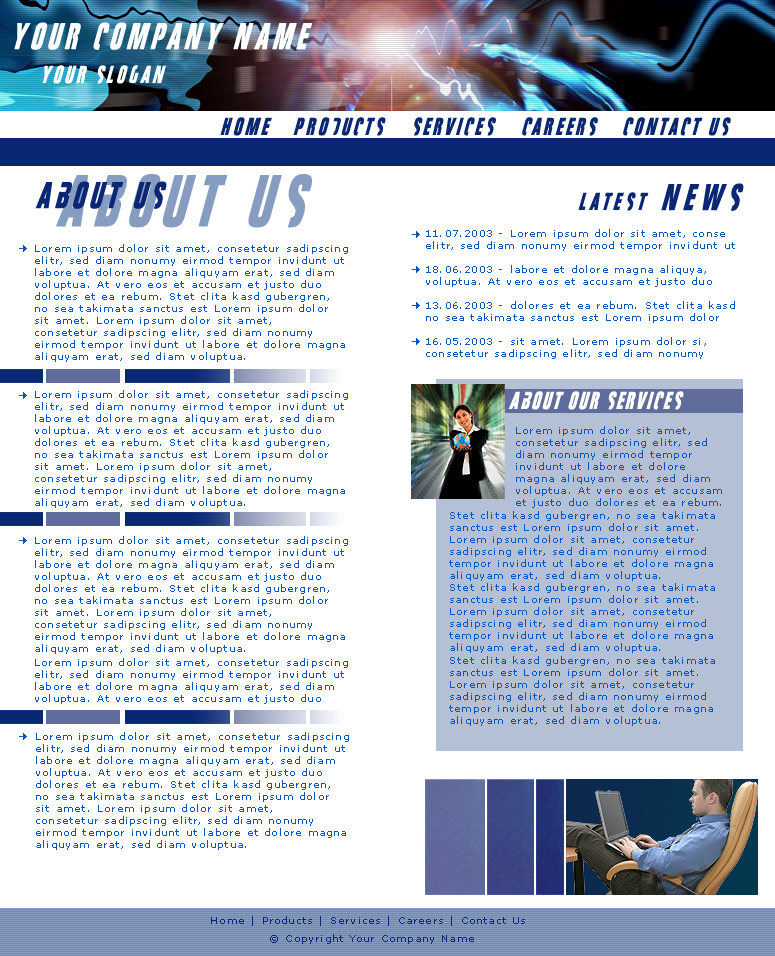
<style>
.page{position:relative;width:775px;height:956px;background:#ffffff}
.page>*{position:absolute;margin:0}
.t1{font:36px "FightThis";letter-spacing:0.6em;color:#ffffff;scale:0.91 1}
.t2{font:24px "FightThis";letter-spacing:0.6em;color:#ffffff;scale:0.91 1}
.t3{font:24px "FightThis";letter-spacing:0.6em;color:#092773;scale:0.91 1}
.t4{font:70.6px "FightThis";letter-spacing:0.6em;color:#869cc0;scale:0.91 1}
.t5{font:36px "FightThis";letter-spacing:0.6em;color:#092773;scale:0.91 1}
.t6{font:24px "FightThis";letter-spacing:0.82em;color:#092773;scale:0.91 1}
.t7{font:36px "FightThis";letter-spacing:0.82em;color:#092773;scale:0.91 1}
.t8{font:10px "Verdana";letter-spacing:0.12em;color:#0a55b8}
.t9{font:24px "FightThis";letter-spacing:0.42em;color:#ffffff;scale:0.91 1}
.t10{font:10px "Verdana";letter-spacing:0.12em;color:#092773}
</style>
<div class="page">
<p class="t1" style="left:14px;top:22px;width:299px;height:28px">Your Company Name</p>
<p class="t2" style="left:42px;top:65px;width:124px;height:19px">your slogan</p>
<p class="t3" style="left:220px;top:117px;width:52px;height:19px">Home</p>
<p class="t3" style="left:293px;top:117px;width:93px;height:19px">Products</p>
<p class="t3" style="left:414px;top:117px;width:82px;height:19px">Services</p>
<p class="t3" style="left:522px;top:117px;width:76px;height:19px">Careers</p>
<p class="t3" style="left:623px;top:117px;width:108px;height:19px">contact us</p>
<p class="t4" style="left:56px;top:174px;width:256px;height:54px">About us</p>
<p class="t5" style="left:35px;top:181px;width:132px;height:28px">About us</p>
<p class="t6" style="left:578px;top:183px;width:166px;height:28px">latest<span class="t7"> news</span></p>
<p class="t8" style="left:426px;top:229px;width:309px;height:130px">11.07.2003 - Lorem ipsum dolor sit amet, conse<br>elitr, sed diam nonumy eirmod tempor invidunt ut <br><br>18.06.2003 - labore et dolore magna aliquya,<br>voluptua. At vero eos et accusam et justo duo <br><br>13.06.2003 - dolores et ea rebum. Stet clita kasd<br>no sea takimata sanctus est Lorem ipsum dolor <br><br>16.05.2003 - sit amet. Lorem ipsum dolor si, <br>consetetur sadipscing elitr, sed diam nonumy</p>
<p class="t8" style="left:35px;top:244px;width:313px;height:118px">Lorem ipsum dolor sit amet, consetetur sadipscing <br>elitr, sed diam nonumy eirmod tempor invidunt ut <br>labore et dolore magna aliquyam erat, sed diam <br>voluptua. At vero eos et accusam et justo duo <br>dolores et ea rebum. Stet clita kasd gubergren, <br>no sea takimata sanctus est Lorem ipsum dolor <br>sit amet. Lorem ipsum dolor sit amet, <br>consetetur sadipscing elitr, sed diam nonumy <br>eirmod tempor invidunt ut labore et dolore magna <br>aliquyam erat, sed diam voluptua.</p>
<p class="t8" style="left:35px;top:390px;width:313px;height:118px">Lorem ipsum dolor sit amet, consetetur sadipscing <br>elitr, sed diam nonumy eirmod tempor invidunt ut <br>labore et dolore magna aliquyam erat, sed diam <br>voluptua. At vero eos et accusam et justo duo <br>dolores et ea rebum. Stet clita kasd gubergren, <br>no sea takimata sanctus est Lorem ipsum dolor <br>sit amet. Lorem ipsum dolor sit amet, <br>consetetur sadipscing elitr, sed diam nonumy <br>eirmod tempor invidunt ut labore et dolore magna <br>aliquyam erat, sed diam voluptua.</p>
<p class="t9" style="left:508px;top:391px;width:176px;height:19px">About our services</p>
<p class="t8" style="left:516px;top:426px;width:206px;height:82px">Lorem ipsum dolor sit amet, <br>consetetur sadipscing elitr, sed <br>diam nonumy eirmod tempor <br>invidunt ut labore et dolore <br>magna aliquyam erat, sed diam <br>voluptua. At vero eos et accusam <br>et justo duo dolores et ea rebum.</p>
<p class="t8" style="left:449px;top:511px;width:266px;height:70px">Stet clita kasd gubergren, no sea takimata <br>sanctus est Lorem ipsum dolor sit amet. <br>Lorem ipsum dolor sit amet, consetetur <br>sadipscing elitr, sed diam nonumy eirmod <br>tempor invidunt ut labore et dolore magna <br>aliquyam erat, sed diam voluptua.</p>
<p class="t8" style="left:35px;top:536px;width:313px;height:118px">Lorem ipsum dolor sit amet, consetetur sadipscing <br>elitr, sed diam nonumy eirmod tempor invidunt ut <br>labore et dolore magna aliquyam erat, sed diam <br>voluptua. At vero eos et accusam et justo duo <br>dolores et ea rebum. Stet clita kasd gubergren, <br>no sea takimata sanctus est Lorem ipsum dolor <br>sit amet. Lorem ipsum dolor sit amet, <br>consetetur sadipscing elitr, sed diam nonumy <br>eirmod tempor invidunt ut labore et dolore magna <br>aliquyam erat, sed diam voluptua.</p>
<p class="t8" style="left:449px;top:583px;width:266px;height:70px">Stet clita kasd gubergren, no sea takimata <br>sanctus est Lorem ipsum dolor sit amet. <br>Lorem ipsum dolor sit amet, consetetur <br>sadipscing elitr, sed diam nonumy eirmod <br>tempor invidunt ut labore et dolore magna <br>aliquyam erat, sed diam voluptua.</p>
<p class="t8" style="left:35px;top:658px;width:313px;height:46px">Lorem ipsum dolor sit amet, consetetur sadipscing <br>elitr, sed diam nonumy eirmod tempor invidunt ut <br>labore et dolore magna aliquyam erat, sed diam <br>voluptua. At vero eos et accusam et justo duo</p>
<p class="t8" style="left:449px;top:656px;width:266px;height:70px">Stet clita kasd gubergren, no sea takimata <br>sanctus est Lorem ipsum dolor sit amet. <br>Lorem ipsum dolor sit amet, consetetur <br>sadipscing elitr, sed diam nonumy eirmod <br>tempor invidunt ut labore et dolore magna <br>aliquyam erat, sed diam voluptua.</p>
<p class="t8" style="left:36px;top:732px;width:313px;height:118px">Lorem ipsum dolor sit amet, consetetur sadipscing <br>elitr, sed diam nonumy eirmod tempor invidunt ut <br>labore et dolore magna aliquyam erat, sed diam <br>voluptua. At vero eos et accusam et justo duo <br>dolores et ea rebum. Stet clita kasd gubergren, <br>no sea takimata sanctus est Lorem ipsum dolor <br>sit amet. Lorem ipsum dolor sit amet, <br>consetetur sadipscing elitr, sed diam nonumy <br>eirmod tempor invidunt ut labore et dolore magna <br>aliquyam erat, sed diam voluptua.</p>
<p class="t10" style="left:211px;top:916px;width:314px;height:10px">Home | Products | Services | Careers | Contact Us</p>
<p class="t10" style="left:270px;top:934px;width:204px;height:10px">© Copyright Your Company Name</p>
</div>
